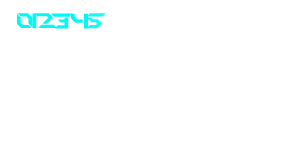
<style>
.page{position:relative;width:300px;height:150px;background:#ffffff}
.page>*{position:absolute;margin:0}
.t1{font:20.8px "PerfectDark(BRK)";color:#00f9f5}
.t2{font:20.8px "PerfectDark(BRK)";color:#19faf6}
</style>
<div class="page">
<p class="t1" style="left:17px;top:13px;width:16px;height:15px">0</p>
<p class="t1" style="left:32px;top:13px;width:5px;height:16px">1</p>
<p class="t1" style="left:34px;top:13px;width:23px;height:15px">2</p>
<p class="t1" style="left:51px;top:13px;width:21px;height:16px">3</p>
<p class="t1" style="left:71px;top:13px;width:17px;height:16px">4</p>
<p class="t2" style="left:87px;top:13px;width:19px;height:16px">5</p>
</div>
